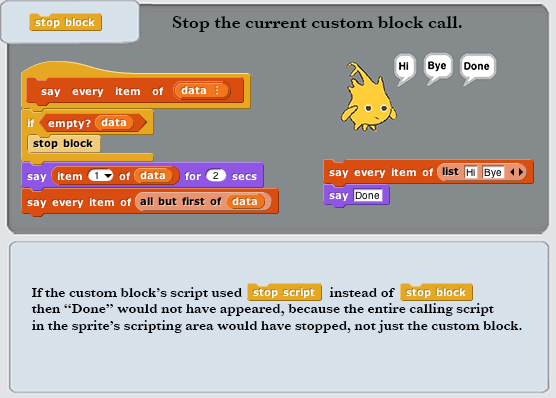
<style>
.page{position:relative;width:556px;height:398px;background:#d6e1ea}
.page>*{position:absolute;margin:0}
.t1{font:18px "Baskerville-SemiBold";color:#000000}
.t2{font:14px "Baskerville-SemiBold";color:#000000}
</style>
<div class="page">
<p class="t1" style="left:173px;top:16px;width:289px;height:16px">Stop the current custom block call.</p>
<p class="t2" style="left:31px;top:287px;width:491px;height:46px">If the custom block’s script used                         instead of<br>then “Done” would not have appeared, because the entire calling script<br>in the sprite’s scripting area would have stopped, not just the custom block.</p>
</div>
